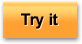
<style>
.page{position:relative;width:82px;height:44px;background:#ffa132}
.page>*{position:absolute;margin:0}
.t1{font:16px "Arial-BoldMT";color:#000000}
</style>
<div class="page">
<p class="t1" style="left:21px;top:13px;width:37px;height:16px">Try it</p>
</div>
